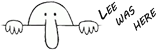
<style>
.page{position:relative;width:160px;height:50px;background:#ffffff}
.page>*{position:absolute;margin:0}
.t1{font:14.5px/14.5px "MVBoli";color:#000000;font-variant:small-caps}
</style>
<div class="page">
<p class="t1" style="left:98px;top:1px;width:58px;height:30px;text-align:right;rotate:-37deg">Lee<br>was<br>here</p>
</div>
